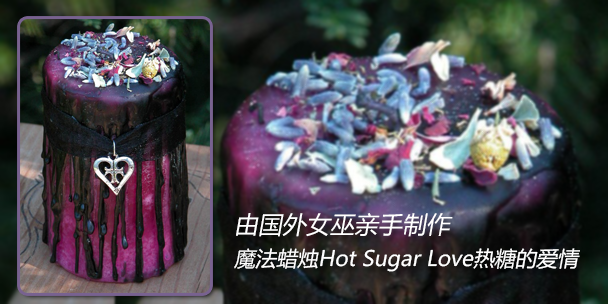
<style>
.page{position:relative;width:608px;height:304px}
.page>*{position:absolute;margin:0}
.t1{font:21px/36px "MicrosoftYaHei";color:#ffffff;font-style:italic}
.t2{font:24px/36px "MicrosoftYaHei";color:#ffffff;font-style:italic}
</style>
<div class="page">
<p class="t1" style="left:234px;top:213px;width:346px;height:59px"><span class="t2">由国外女巫亲手制作</span><br>魔法蜡烛Hot Sugar Love热糖的爱情</p>
</div>
